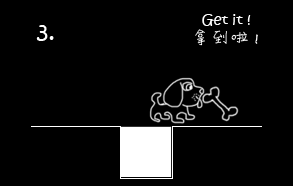
<style>
.page{position:relative;width:293px;height:186px;background:#000000}
.page>*{position:absolute;margin:0}
.t1{font:14px "KristenITC-Regular";color:#fefefe}
.t2{font:24px "KristenITC-Regular";color:#fefefe}
.t3{font:18px "Li-Xuke-Comic-Font";color:#fefefe}
</style>
<div class="page">
<p class="t1" style="left:202px;top:14px;width:49px;height:12px">Get it !</p>
<p class="t2" style="left:36px;top:25px;width:18px;height:16px">3.</p>
<p class="t3" style="left:195px;top:29px;width:63px;height:17px">拿到啦！</p>
</div>
